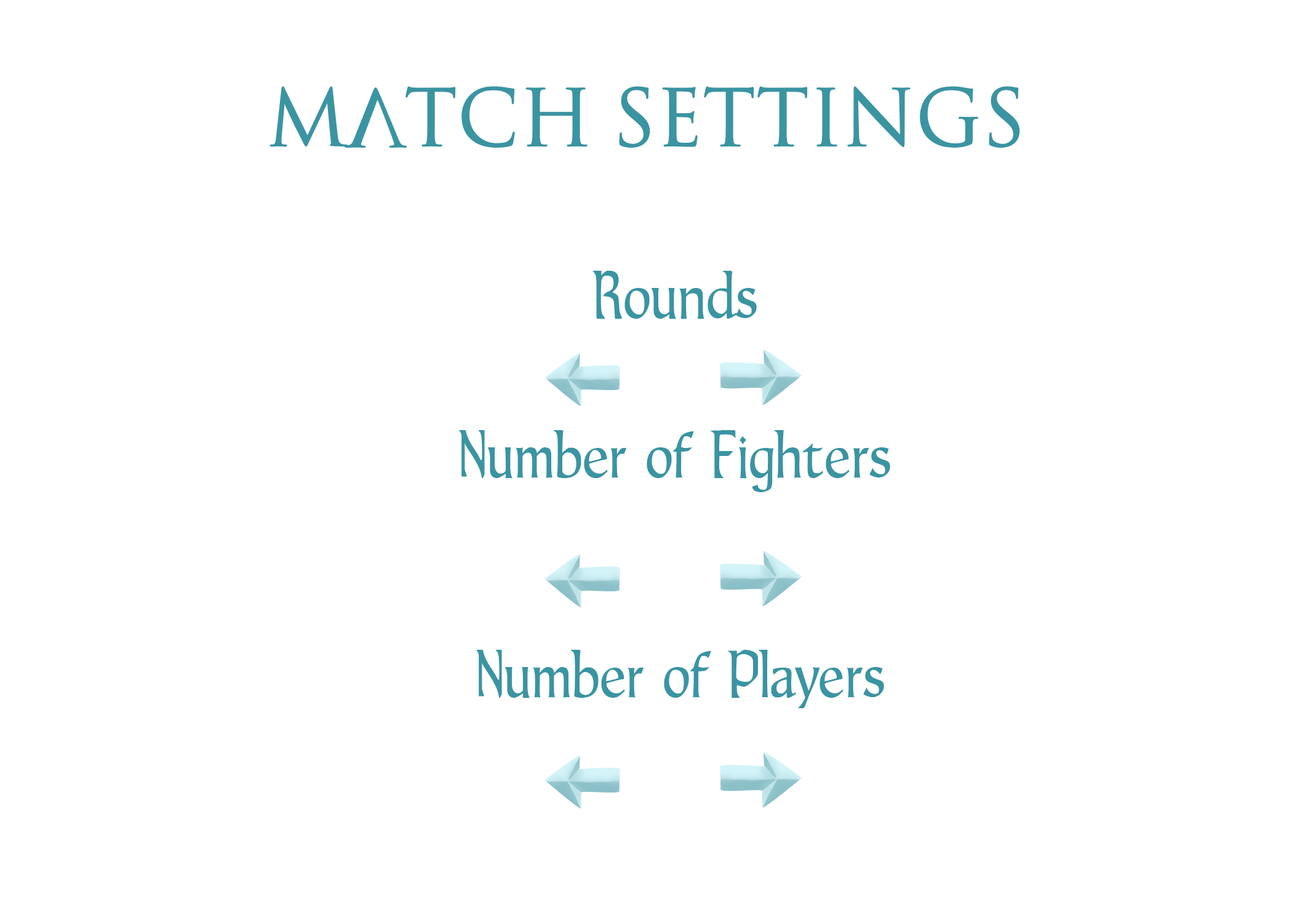
<style>
.page{position:relative;width:1292px;height:923px;background:#ffffff}
.page>*{position:absolute;margin:0}
.t1{font:76.9px "SpaceandAstronomy";color:#3a94a2}
.t2{font:61.5px "TaraType";color:#3a94a2}
</style>
<div class="page">
<p class="t1" style="left:269px;top:86px;width:751px;height:62px">Match Settings</p>
<p class="t2" style="left:592px;top:271px;width:165px;height:48px">Rounds</p>
<p class="t2" style="left:459px;top:430px;width:431px;height:62px">Number of Fighters</p>
<p class="t2" style="left:476px;top:650px;width:408px;height:58px">Number of Players</p>
</div>
